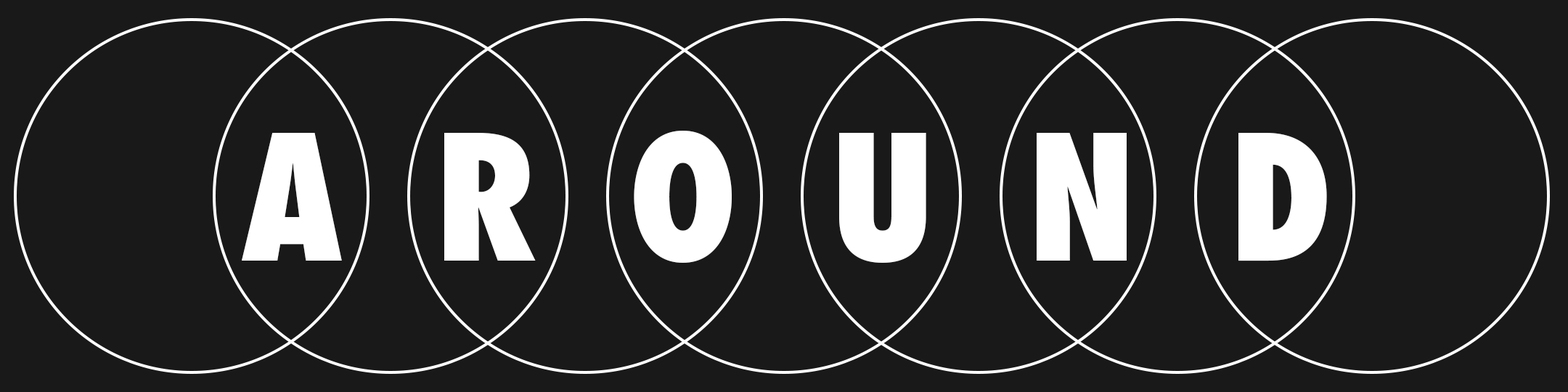
<style>
.page{position:relative;width:1568px;height:392px;background:#191919}
.page>*{position:absolute;margin:0}
.t1{font:169.4px "FuturaStd-CondensedExtraBd";letter-spacing:0.54em;color:#ffffff}
</style>
<div class="page">
<p class="t1" style="left:242px;top:131px;width:1085px;height:132px">AROUND</p>
</div>
